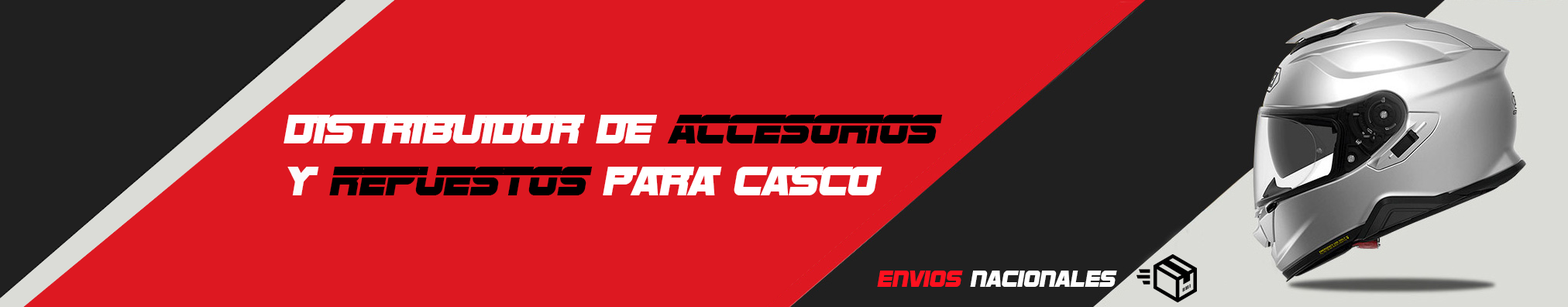
<style>
.page{position:relative;width:1568px;height:307px;background:#dd1821}
.page>*{position:absolute;margin:0}
.t1{font:43.5px "SFSportsNightNSAlternate";color:#fefefe}
.t2{font:43.5px "SFSportsNightAlternate";color:#000000}
.t3{font:43.5px "SFSportsNightNSAlternate";color:#fbfbfb}
.t4{font:43.5px "SFSportsNightNSAlternate";color:#ffffff}
.t5{font:23.9px "SFSportsNightNS";color:#ffffff}
.t6{font:23.9px "SFSportsNightNS";color:#ff111f}
</style>
<div class="page">
<p class="t1" style="left:284px;top:115px;width:659px;height:80px">distribuidor de<span class="t2"> accesorios <br></span><span class="t3">y</span><span class="t2"> repuestos </span><span class="t4">para casco</span></p>
<p class="t5" style="left:877px;top:270px;width:240px;height:17px"><span class="t6">envios </span>nacionales</p>
</div>
